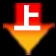
<style>
.page{position:relative;width:56px;height:56px;background:#000000}
.page>*{position:absolute;margin:0}
.t1{font:28px "KozGoPr6N-Heavy";color:#ffffff}
</style>
<div class="page">
<p class="t1" style="left:14px;top:5px;width:27px;height:26px">上</p>
</div>
